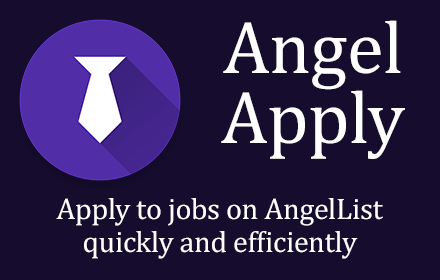
<style>
.page{position:relative;width:440px;height:280px;background:#160c2e}
.page>*{position:absolute;margin:0}
.t1{font:75px/45px "CambriaMath";letter-spacing:-0.01em;color:#ffffff}
.t2{font:30px/7.5px "CambriaMath";letter-spacing:-0.01em;color:#ffffff}
</style>
<div class="page">
<p class="t1" style="left:221px;top:20px;width:184px;height:139px;text-align:center">Angel<br>Apply</p>
<p class="t2" style="left:56px;top:198px;width:327px;height:61px;text-align:center">Apply to jobs on AngelList<br>quickly and efficiently</p>
</div>
